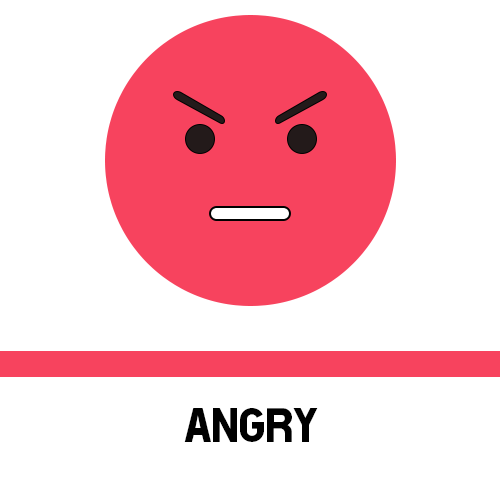
<style>
.page{position:relative;width:500px;height:500px;background:#ffffff}
.page>*{position:absolute;margin:0}
.t1{font:48px "HotelDeParisXe";color:#000000}
</style>
<div class="page">
<p class="t1" style="left:184px;top:408px;width:134px;height:34px">Angry</p>
</div>
